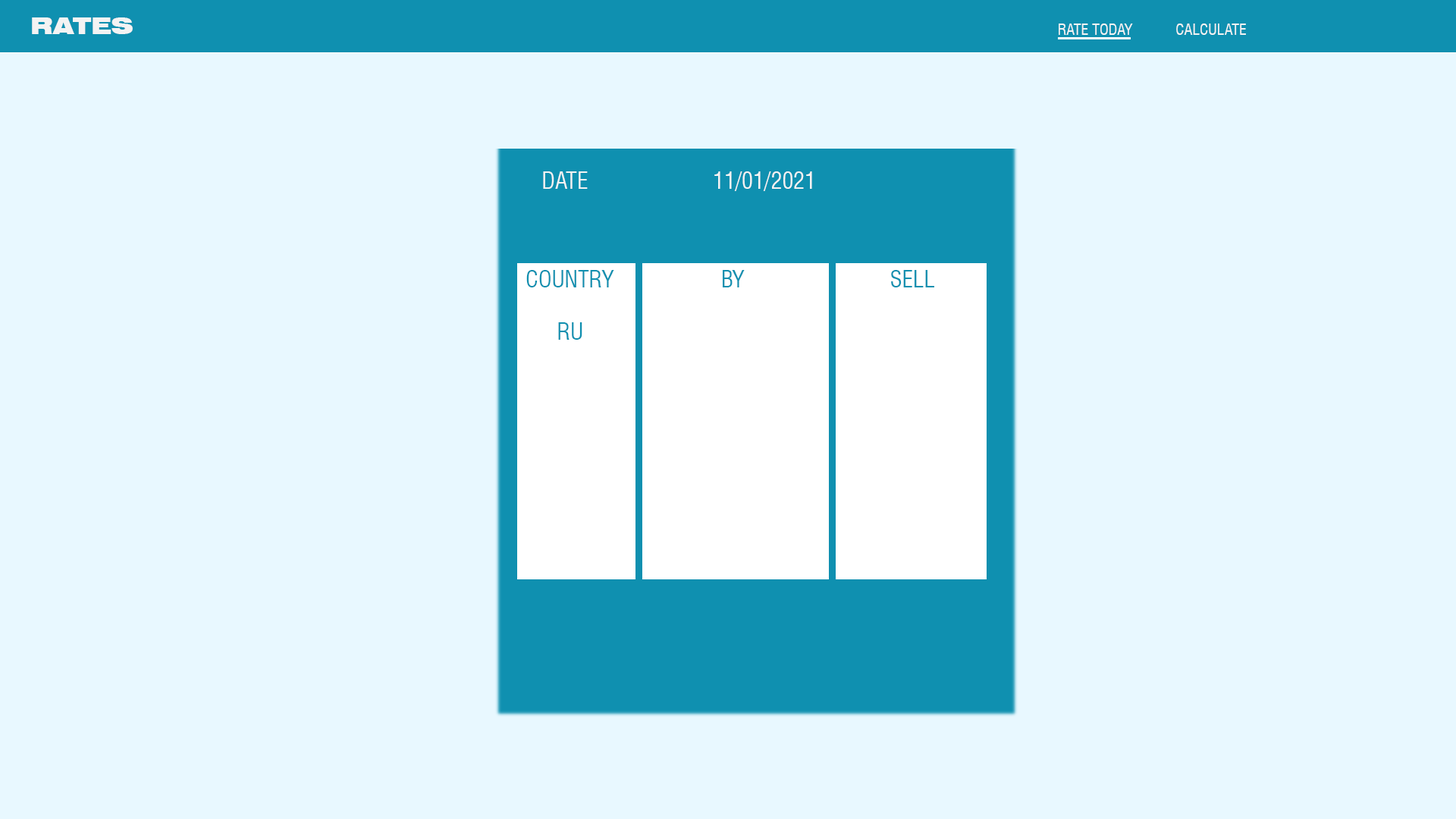
<style>
.page{position:relative;width:1456px;height:819px;background:#e8f8ff}
.page>*{position:absolute;margin:0}
.t1{font:22.7px "Swiss721BT-BlackExtended";color:#f3f3f3}
.t2{font:15.2px "Swiss721BT-RomanCondensed";color:#f3f3f3}
.t3{font:22.7px "Swiss721BT-RomanCondensed";color:#f3f3f3}
.t4{font:22.7px "Swiss721BT-RomanCondensed";color:#0f90b0}
</style>
<div class="page">
<p class="t1" style="left:32px;top:17px;width:101px;height:17px">RATES</p>
<p class="t2" style="left:1059px;top:24px;width:74px;height:11px">RATE TODAY</p>
<p class="t2" style="left:1176px;top:24px;width:70px;height:11px">CALCULATE</p>
<p class="t3" style="left:543px;top:171px;width:45px;height:18px">DATE</p>
<p class="t3" style="left:714px;top:171px;width:98px;height:20px">11/01/2021</p>
<p class="t4" style="left:526px;top:270px;width:88px;height:17px">COUNTRY</p>
<p class="t4" style="left:723px;top:270px;width:22px;height:17px">BY</p>
<p class="t4" style="left:891px;top:270px;width:43px;height:17px">SELL</p>
<p class="t4" style="left:558px;top:322px;width:24px;height:18px">RU</p>
</div>
